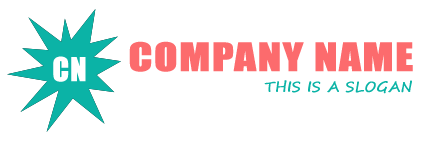
<style>
.page{position:relative;width:436px;height:158px;background:#ffffff}
.page>*{position:absolute;margin:0}
.t1{font:36px "Impact";letter-spacing:0.01em;color:#fc6b6d;text-transform:uppercase;font-weight:bold;scale:1.2 1}
.t2{font:14px "SegoeScript";letter-spacing:0.01em;color:#0bb3a6;text-transform:uppercase;font-weight:bold}
</style>
<div class="page">
<p class="t1" style="left:129px;top:41px;width:284px;height:31px">Company Name</p>
<p class="t2" style="left:264px;top:80px;width:148px;height:14px">this is a slogan</p>
</div>
